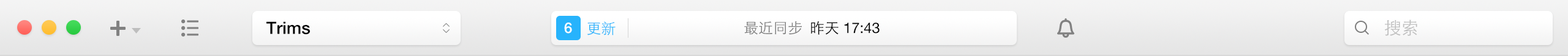
<style>
.page{position:relative;width:1568px;height:56px}
.page>*{position:absolute;margin:0}
.t1{font:17.2px "HelveticaNeue-Medium";color:#000000}
.t2{font:14.7px "HelveticaNeue-Medium";color:#ffffff}
.t3{font:14.7px "STHeitiSC-Light";color:#27b3fc}
.t4{font:14.7px "HelveticaNeue";color:#000000}
.t5{font:14.7px "STHeitiSC-Light";color:#7d7d7d}
.t6{font:14.7px "STHeitiSC-Light";color:#000000}
.t7{font:17.2px "STHeitiSC-Light";color:#bebebe}
</style>
<div class="page">
<p class="t1" style="left:266px;top:21px;width:44px;height:14px">Trims</p>
<p class="t2" style="left:564px;top:23px;width:8px;height:11px">6</p>
<p class="t3" style="left:587px;top:21px;width:29px;height:15px">更新</p>
<p class="t4" style="left:744px;top:21px;width:136px;height:14px"><span class="t5">最近同步  </span><span class="t6">昨天 </span>17:43</p>
<p class="t7" style="left:1384px;top:20px;width:33px;height:16px">搜索</p>
</div>
